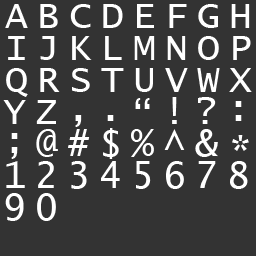
<style>
.page{position:relative;width:256px;height:256px;background:#333333}
.page>*{position:absolute;margin:0}
.t1{font:37.5px "LucidaConsole";color:#ffffff}
</style>
<div class="page">
<p class="t1" style="left:5px;top:4px;width:23px;height:24px">A</p>
<p class="t1" style="left:40px;top:4px;width:18px;height:24px">B</p>
<p class="t1" style="left:70px;top:4px;width:21px;height:24px">C</p>
<p class="t1" style="left:103px;top:4px;width:20px;height:24px">D</p>
<p class="t1" style="left:137px;top:4px;width:17px;height:24px">E</p>
<p class="t1" style="left:169px;top:4px;width:18px;height:24px">F</p>
<p class="t1" style="left:198px;top:4px;width:20px;height:24px">G</p>
<p class="t1" style="left:231px;top:4px;width:19px;height:24px">H</p>
<p class="t1" style="left:8px;top:36px;width:17px;height:24px">I</p>
<p class="t1" style="left:40px;top:36px;width:15px;height:24px">J</p>
<p class="t1" style="left:72px;top:36px;width:20px;height:24px">K</p>
<p class="t1" style="left:105px;top:36px;width:17px;height:24px">L</p>
<p class="t1" style="left:134px;top:36px;width:21px;height:24px">M</p>
<p class="t1" style="left:167px;top:36px;width:19px;height:24px">N</p>
<p class="t1" style="left:198px;top:36px;width:21px;height:24px">O</p>
<p class="t1" style="left:233px;top:36px;width:18px;height:24px">P</p>
<p class="t1" style="left:6px;top:68px;width:22px;height:29px">Q</p>
<p class="t1" style="left:40px;top:68px;width:20px;height:24px">R</p>
<p class="t1" style="left:72px;top:68px;width:18px;height:24px">S</p>
<p class="t1" style="left:101px;top:68px;width:23px;height:24px">T</p>
<p class="t1" style="left:135px;top:68px;width:18px;height:24px">U</p>
<p class="t1" style="left:165px;top:68px;width:23px;height:24px">V</p>
<p class="t1" style="left:197px;top:68px;width:23px;height:24px">W</p>
<p class="t1" style="left:229px;top:68px;width:23px;height:24px">X</p>
<p class="t1" style="left:3px;top:100px;width:23px;height:24px">Y</p>
<p class="t1" style="left:36px;top:100px;width:20px;height:24px">Z</p>
<p class="t1" style="left:135px;top:98px;width:15px;height:11px">“</p>
<p class="t1" style="left:172px;top:97px;width:5px;height:27px">!</p>
<p class="t1" style="left:198px;top:97px;width:18px;height:27px">?</p>
<p class="t1" style="left:235px;top:101px;width:7px;height:20px">:</p>
<p class="t1" style="left:75px;top:115px;width:7px;height:12px">,</p>
<p class="t1" style="left:107px;top:115px;width:7px;height:6px">.</p>
<p class="t1" style="left:11px;top:133px;width:7px;height:26px">;</p>
<p class="t1" style="left:36px;top:129px;width:22px;height:28px">@</p>
<p class="t1" style="left:68px;top:129px;width:22px;height:27px">#</p>
<p class="t1" style="left:103px;top:128px;width:16px;height:31px">$</p>
<p class="t1" style="left:131px;top:129px;width:23px;height:28px">%</p>
<p class="t1" style="left:164px;top:129px;width:21px;height:21px">^</p>
<p class="t1" style="left:195px;top:129px;width:23px;height:28px">&amp;</p>
<p class="t1" style="left:232px;top:135px;width:17px;height:16px">*</p>
<p class="t1" style="left:6px;top:161px;width:19px;height:27px">1</p>
<p class="t1" style="left:38px;top:161px;width:16px;height:27px">2</p>
<p class="t1" style="left:71px;top:161px;width:16px;height:28px">3</p>
<p class="t1" style="left:101px;top:161px;width:19px;height:27px">4</p>
<p class="t1" style="left:136px;top:161px;width:15px;height:28px">5</p>
<p class="t1" style="left:166px;top:161px;width:18px;height:28px">6</p>
<p class="t1" style="left:198px;top:161px;width:18px;height:27px">7</p>
<p class="t1" style="left:230px;top:161px;width:18px;height:28px">8</p>
<p class="t1" style="left:5px;top:193px;width:19px;height:28px">9</p>
<p class="t1" style="left:37px;top:193px;width:19px;height:28px">0</p>
</div>
